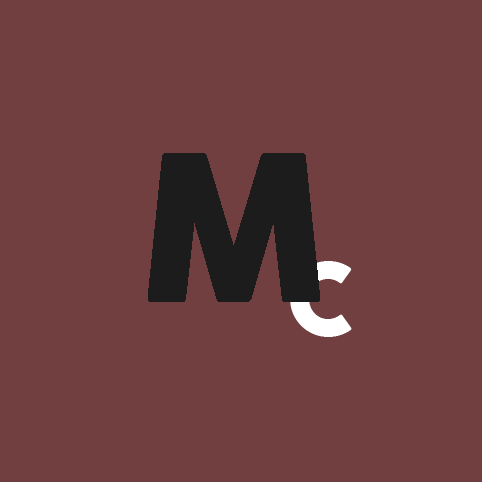
<style>
.page{position:relative;width:482px;height:482px;background:#723f40}
.page>*{position:absolute;margin:0}
.t1{font:200px "Cocogoose";color:#1c1c1c}
.t2{font:100px "Cocogoose";color:#ffffff}
</style>
<div class="page">
<p class="t1" style="left:148px;top:153px;width:172px;height:149px">M</p>
<p class="t2" style="left:290px;top:261px;width:62px;height:76px">C</p>
</div>
